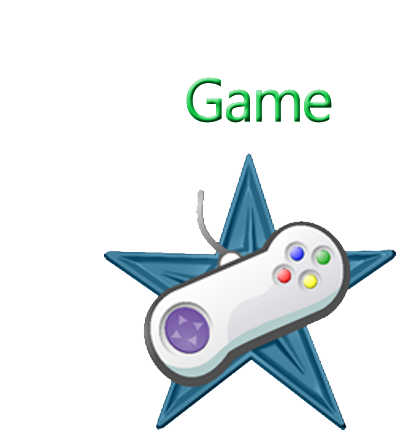
<style>
.page{position:relative;width:398px;height:432px;background:#ffffff}
.page>*{position:absolute;margin:0}
.t1{font:60.2px "MicrosoftNewTaiLue";letter-spacing:-0.06em;font-weight:bold}
</style>
<div class="page">
<p class="t1" style="left:186px;top:77px;width:146px;height:46px">Game</p>
</div>
